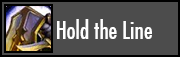
<style>
.page{position:relative;width:180px;height:57px;background:#4c4c4c}
.page>*{position:absolute;margin:0}
.t1{font:24px "FuturaCondensed";color:#ffffff}
</style>
<div class="page">
<p class="t1" style="left:57px;top:19px;width:95px;height:20px">Hold the Line</p>
</div>
